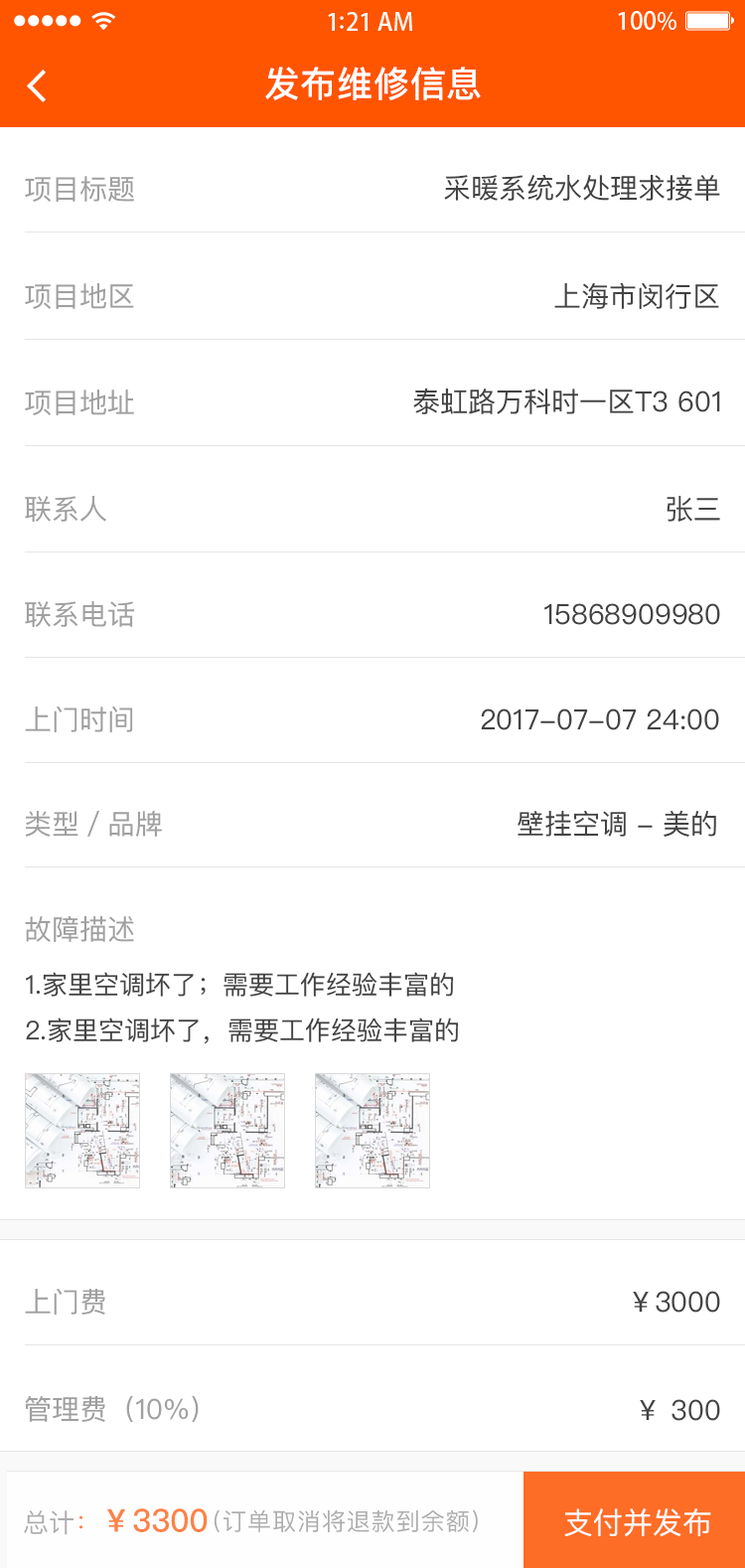
<style>
.page{position:relative;width:745px;height:1568px;background:#ffffff}
.page>*{position:absolute;margin:0}
.t1{font:35.8px "PingFangSC-Medium";letter-spacing:0.02em;color:#ffffff}
.t2{font:27.8px "PingFangSC-Regular";color:#434343}
.t3{font:27.8px "PingFangSC-Regular";color:#a0a0a0}
.t4{font:25.8px/49.7px "PingFangSC-Regular";color:#434343}
.t5{font:31.8px "PingFangSC-Medium";color:#fd8245;text-transform:uppercase}
.t6{font:25.8px "PingFangSC-Regular";color:#fd8245;text-transform:uppercase}
.t7{font:23.8px "PingFangSC-Regular";letter-spacing:0.04em;color:#a0a0a0;text-transform:uppercase}
.t8{font:29.8px "PingFangSC-Regular";color:#ffffff}
</style>
<div class="page">
<p class="t1" style="left:265px;top:67px;width:216px;height:33px">发布维修信息</p>
<p class="t2" style="left:444px;top:174px;width:276px;height:27px">采暖系统水处理求接单</p>
<p class="t3" style="left:25px;top:176px;width:109px;height:26px">项目标题</p>
<p class="t3" style="left:25px;top:283px;width:109px;height:26px">项目地区</p>
<p class="t2" style="left:554px;top:282px;width:165px;height:27px">上海市闵行区</p>
<p class="t3" style="left:25px;top:390px;width:109px;height:25px">项目地址</p>
<p class="t2" style="left:413px;top:388px;width:307px;height:26px">泰虹路万科时一区T3 601</p>
<p class="t3" style="left:25px;top:496px;width:81px;height:27px">联系人</p>
<p class="t2" style="left:667px;top:496px;width:53px;height:26px">张三</p>
<p class="t3" style="left:25px;top:601px;width:110px;height:27px">联系电话</p>
<p class="t2" style="left:545px;top:603px;width:175px;height:22px">15868909980</p>
<p class="t3" style="left:25px;top:706px;width:108px;height:26px">上门时间</p>
<p class="t2" style="left:481px;top:708px;width:238px;height:22px">2017-07-07 24:00</p>
<p class="t3" style="left:25px;top:810px;width:137px;height:27px">类型／品牌</p>
<p class="t2" style="left:518px;top:810px;width:198px;height:27px">壁挂空调 - 美的</p>
<p class="t3" style="left:25px;top:916px;width:109px;height:26px">故障描述</p>
<p class="t4" style="left:26px;top:972px;width:433px;height:72px">1.家里空调坏了；需要工作经验丰富的<br>2.家里空调坏了，需要工作经验丰富的</p>
<p class="t3" style="left:25px;top:1288px;width:80px;height:27px">上门费</p>
<p class="t2" style="left:633px;top:1291px;width:87px;height:22px">￥3000</p>
<p class="t3" style="left:25px;top:1395px;width:174px;height:28px">管理费（10%）</p>
<p class="t2" style="left:640px;top:1399px;width:80px;height:22px">￥ 300</p>
<p class="t5" style="left:24px;top:1508px;width:184px;height:27px"><span class="t6">总计</span><span class="t6">：</span>￥3300</p>
<p class="t7" style="left:214px;top:1509px;width:264px;height:23px">（订单取消将退款到余额）</p>
<p class="t8" style="left:564px;top:1508px;width:147px;height:29px">支付并发布</p>
</div>
